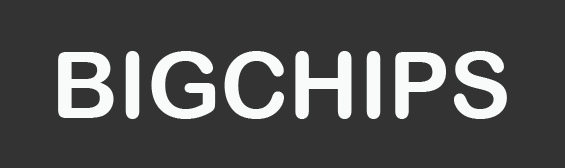
<style>
.page{position:relative;width:565px;height:168px;background:#333333}
.page>*{position:absolute;margin:0}
.t1{font:92.1px "ArialRoundedMTBold";color:#f9fafa}
</style>
<div class="page">
<p class="t1" style="left:58px;top:51px;width:449px;height:68px">BIGCHIPS</p>
</div>
